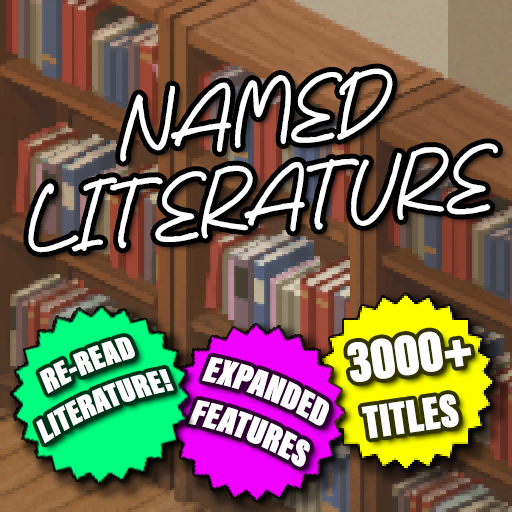
<style>
.page{position:relative;width:512px;height:512px}
.page>*{position:absolute;margin:0}
.t1{font:71.6px "ReyhartSejenack";color:#ffffff}
.t2{font:34px "AcuminConcept-ExtraCondensedUltraBlack";color:#ffffff}
.t3{font:48px "AcuminConcept-ExtraCondensedUltraBlack";color:#ffffff}
.t4{font:60px "AcuminConcept-ExtraCondensedUltraBlack";color:#ffffff}
.t5{font:38px "AcuminConcept-ExtraCondensedUltraBlack";color:#ffffff}
</style>
<div class="page">
<p class="t1" style="left:28px;top:68px;width:470px;height:185px;rotate:-5deg">NAMED LITERATURE</p>
<p class="t2" style="left:36px;top:337px;width:138px;height:107px;text-align:center;rotate:-22deg">RE-READ<br>LITERATURE!</p>
<p class="t3" style="left:347px;top:331px;width:125px;height:108px;text-align:center;rotate:-8deg"><span class="t4">  3000+ <br></span>TITLES</p>
<p class="t5" style="left:188px;top:356px;width:141px;height:111px;text-align:center;rotate:22deg">EXPANDED<br>FEATURES</p>
</div>
